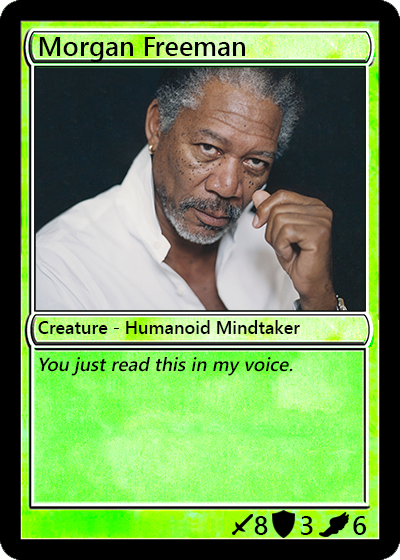
<style>
.page{position:relative;width:400px;height:560px}
.page>*{position:absolute;margin:0}
.t1{font:27px "YuGothicUI-Semibold";color:#000000}
.t2{font:18px "YuGothicUI-Semibold";color:#000000}
.t3{font:19px "YuGothicUI-Semibold";color:#000000;font-style:italic}
</style>
<div class="page">
<p class="t1" style="left:39px;top:37px;width:206px;height:25px">Morgan Freeman</p>
<p class="t2" style="left:38px;top:320px;width:262px;height:14px">Creature - Humanoid Mindtaker</p>
<p class="t3" style="left:39px;top:357px;width:254px;height:19px">You just read this in my voice.</p>
<p class="t1" style="left:254px;top:516px;width:14px;height:19px">8</p>
<p class="t1" style="left:301px;top:516px;width:12px;height:19px">3</p>
<p class="t1" style="left:353px;top:516px;width:13px;height:19px">6</p>
</div>
